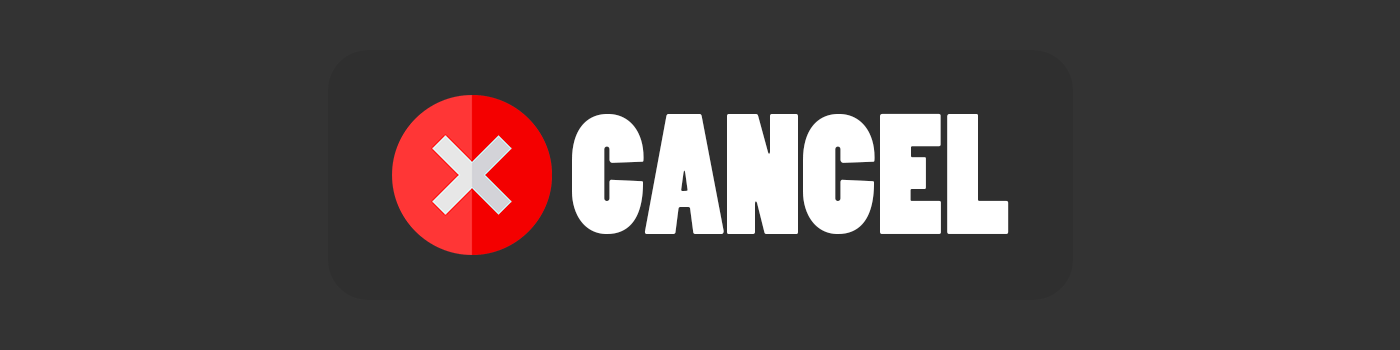
<style>
.page{position:relative;width:1400px;height:350px;background:#333333}
.page>*{position:absolute;margin:0}
.t1{font:160px "PoplarStd";color:#ffffff}
</style>
<div class="page">
<p class="t1" style="left:572px;top:113px;width:437px;height:121px">CANCEL</p>
</div>
